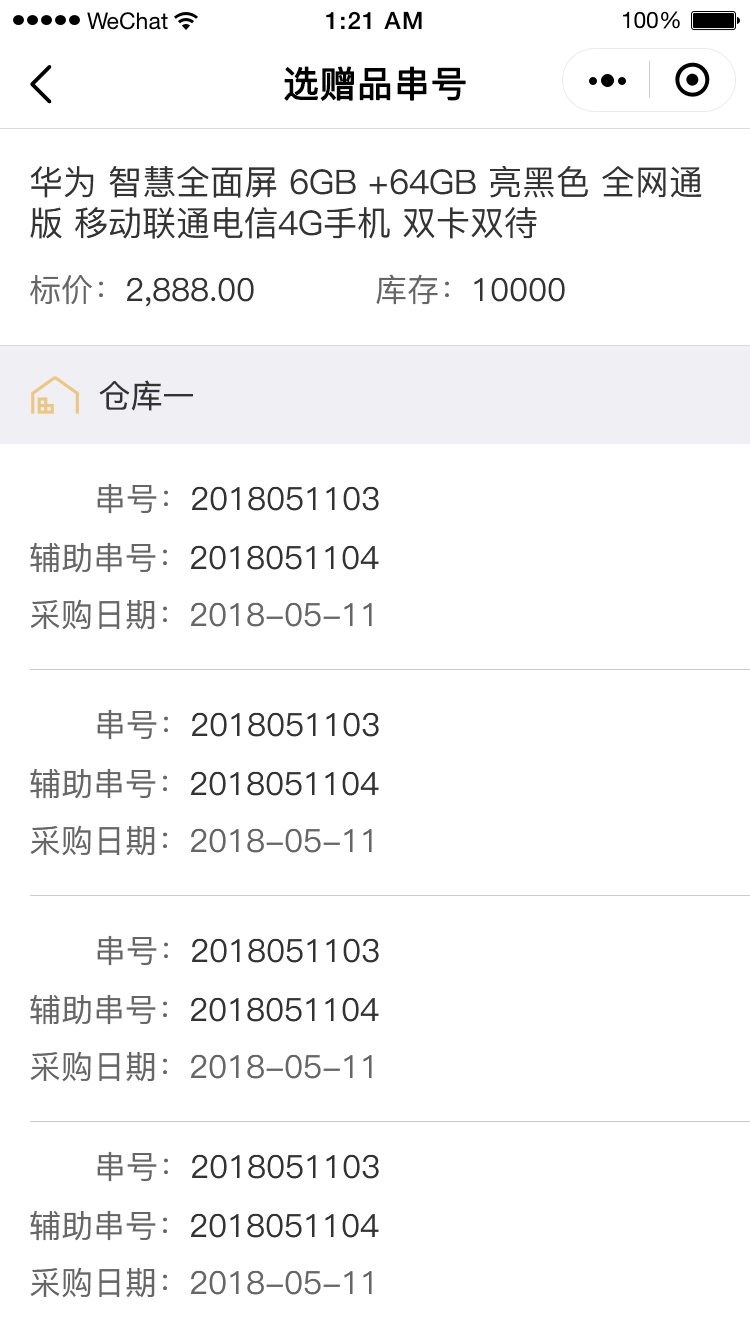
<style>
.page{position:relative;width:750px;height:1334px;background:#ffffff}
.page>*{position:absolute;margin:0}
.t1{font:36px "PingFang-SC-Medium";color:#000000;font-weight:bold}
.t2{font:34px "PingFang-SC-Medium";color:#333333}
.t3{font:32px "PingFang-SC-Medium";color:#333333}
.t4{font:32px "PingFang-SC-Medium";color:#666666}
</style>
<div class="page">
<p class="t1" style="left:284px;top:66px;width:182px;height:35px">选赠品串号</p>
<p class="t2" style="left:30px;top:166px;width:672px;height:73px">华为 智慧全面屏 6GB +64GB 亮黑色 全网通版 移动联通电信4G手机 双卡双待</p>
<p class="t3" style="left:30px;top:275px;width:224px;height:32px"><span class="t4">标价：</span>2,888.00</p>
<p class="t3" style="left:376px;top:274px;width:189px;height:31px"><span class="t4">库存：</span>10000</p>
<p class="t3" style="left:99px;top:380px;width:94px;height:31px">仓库一</p>
<p class="t3" style="left:97px;top:483px;width:282px;height:31px"><span class="t4">串号：</span>2018051103</p>
<p class="t3" style="left:30px;top:542px;width:349px;height:31px"><span class="t4">辅助串号：</span>2018051104</p>
<p class="t4" style="left:30px;top:599px;width:342px;height:31px">采购日期：2018-05-11</p>
<p class="t3" style="left:97px;top:709px;width:282px;height:31px"><span class="t4">串号：</span>2018051103</p>
<p class="t3" style="left:30px;top:768px;width:349px;height:31px"><span class="t4">辅助串号：</span>2018051104</p>
<p class="t4" style="left:30px;top:825px;width:342px;height:31px">采购日期：2018-05-11</p>
<p class="t3" style="left:97px;top:935px;width:282px;height:31px"><span class="t4">串号：</span>2018051103</p>
<p class="t3" style="left:30px;top:994px;width:349px;height:31px"><span class="t4">辅助串号：</span>2018051104</p>
<p class="t4" style="left:30px;top:1051px;width:342px;height:31px">采购日期：2018-05-11</p>
<p class="t3" style="left:97px;top:1151px;width:282px;height:31px"><span class="t4">串号：</span>2018051103</p>
<p class="t3" style="left:30px;top:1210px;width:349px;height:31px"><span class="t4">辅助串号：</span>2018051104</p>
<p class="t4" style="left:30px;top:1267px;width:342px;height:31px">采购日期：2018-05-11</p>
</div>
